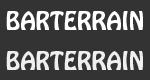
<style>
.page{position:relative;width:150px;height:80px;background:#333333}
.page>*{position:absolute;margin:0}
.t1{font:22px "HoboStd";color:#ffffff}
</style>
<div class="page">
<p class="t1" style="left:6px;top:11px;width:137px;height:19px">BARTERRAIN</p>
<p class="t1" style="left:6px;top:51px;width:137px;height:19px">BARTERRAIN</p>
</div>
